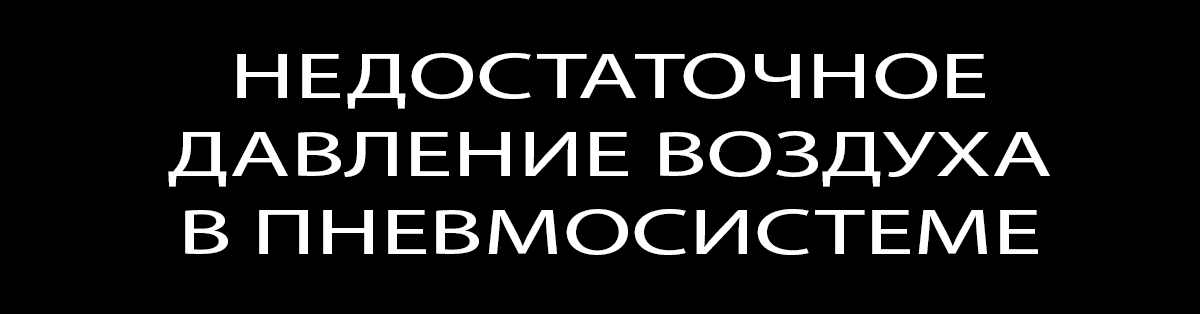
<style>
.page{position:relative;width:1200px;height:314px;background:#000000}
.page>*{position:absolute;margin:0}
.t1{font:65px "MyriadPro-Regular";color:#ffffff;scale:1.53 1}
</style>
<div class="page">
<p class="t1" style="left:168px;top:53px;width:882px;height:202px;text-align:center">НЕДОСТАТОЧНОЕ ДАВЛЕНИЕ ВОЗДУХА<br>В ПНЕВМОСИСТЕМЕ</p>
</div>
